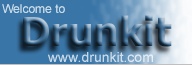
<style>
.page{position:relative;width:192px;height:65px;background:#3975a7}
.page>*{position:absolute;margin:0}
.t1{font:12px "ArialMT";color:#c8d9e6}
.t2{font:14px "ArialMT";color:#cbdbe8}
</style>
<div class="page">
<p class="t1" style="left:2px;top:4px;width:63px;height:9px">Welcome to</p>
<p class="t2" style="left:48px;top:52px;width:105px;height:10px">www.drunkit.com</p>
</div>
